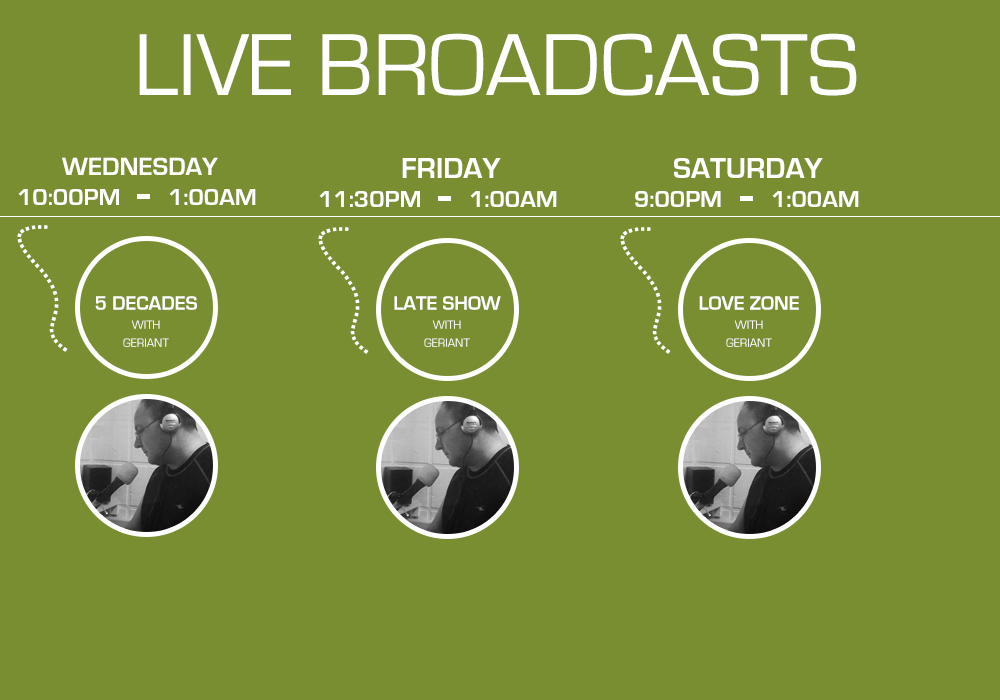
<style>
.page{position:relative;width:1000px;height:700px;background:#798e31}
.page>*{position:absolute;margin:0}
.t1{font:91px "EurostileRegular";color:#ffffff;text-transform:uppercase}
.t2{font:26px "EurostileBold";color:#ffffff;text-transform:uppercase}
.t3{font:30px "EurostileBold";color:#ffffff;text-transform:uppercase}
.t4{font:24px "EurostileBold";color:#ffffff;text-transform:uppercase}
.t5{font:20.1px "EurostileBold";color:#ffffff;text-transform:uppercase}
.t6{font:12.1px "EurostileRegular";color:#ffffff;text-transform:uppercase}
</style>
<div class="page">
<p class="t1" style="left:139px;top:33px;width:718px;height:63px">LIVE BROADCASTS</p>
<p class="t2" style="left:62px;top:157px;width:156px;height:18px">WEdnesday</p>
<p class="t3" style="left:402px;top:158px;width:99px;height:20px">FRIDAY</p>
<p class="t3" style="left:674px;top:158px;width:149px;height:20px">SATURDAY</p>
<p class="t4" style="left:18px;top:189px;width:101px;height:16px">10:00pm</p>
<p class="t4" style="left:169px;top:189px;width:87px;height:16px">1:00am</p>
<p class="t4" style="left:319px;top:191px;width:101px;height:16px">11:30pm</p>
<p class="t4" style="left:470px;top:191px;width:87px;height:16px">1:00am</p>
<p class="t4" style="left:635px;top:191px;width:86px;height:16px">9:00pm</p>
<p class="t4" style="left:772px;top:191px;width:87px;height:16px">1:00am</p>
<p class="t3" style="left:17px;top:225px;width:51px;height:127px">............................</p>
<p class="t3" style="left:318px;top:227px;width:51px;height:127px">............................</p>
<p class="t3" style="left:620px;top:227px;width:51px;height:127px">............................</p>
<p class="t5" style="left:95px;top:296px;width:102px;height:14px">5 decades</p>
<p class="t5" style="left:394px;top:296px;width:107px;height:14px">LATE SHOW</p>
<p class="t5" style="left:699px;top:296px;width:100px;height:14px">LOVE ZONE</p>
<p class="t6" style="left:131px;top:320px;width:29px;height:9px">with</p>
<p class="t6" style="left:432px;top:320px;width:29px;height:9px">with</p>
<p class="t6" style="left:734px;top:320px;width:29px;height:9px">with</p>
<p class="t6" style="left:123px;top:338px;width:46px;height:9px">GERIANT</p>
<p class="t6" style="left:424px;top:338px;width:46px;height:9px">GERIANT</p>
<p class="t6" style="left:726px;top:338px;width:46px;height:9px">GERIANT</p>
</div>
